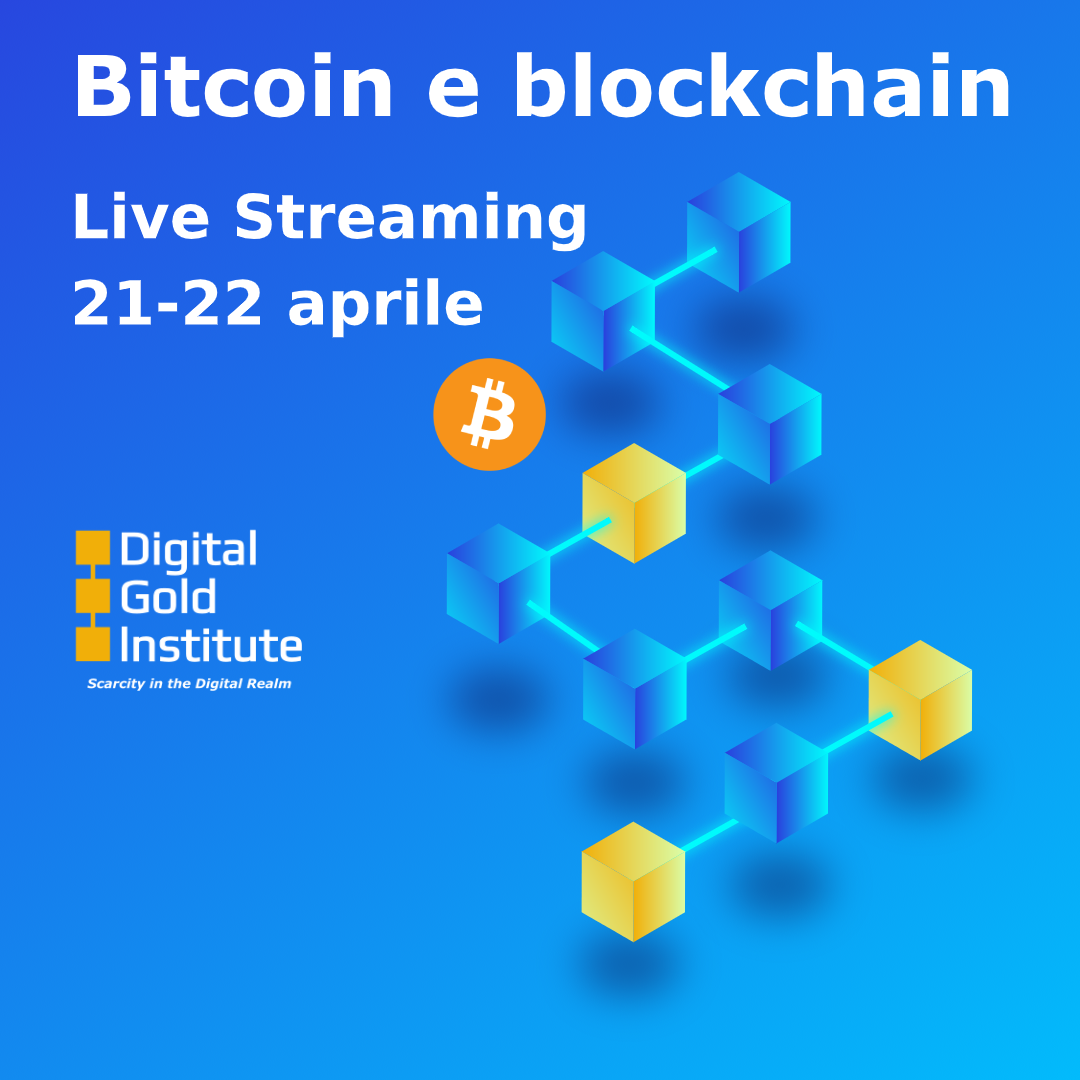
<style>
.page{position:relative;width:1080px;height:1080px}
.page>*{position:absolute;margin:0}
.t1{font:84px "Verdana-Bold";color:#ffffff}
.t2{font:61px "Verdana-Bold";color:#ffffff}
</style>
<div class="page">
<p class="t1" style="left:77px;top:52px;width:932px;height:66px">Bitcoin e blockchain</p>
<p class="t2" style="left:75px;top:191px;width:510px;height:147px">Live Streaming<br><br>21-22 aprile</p>
</div>
